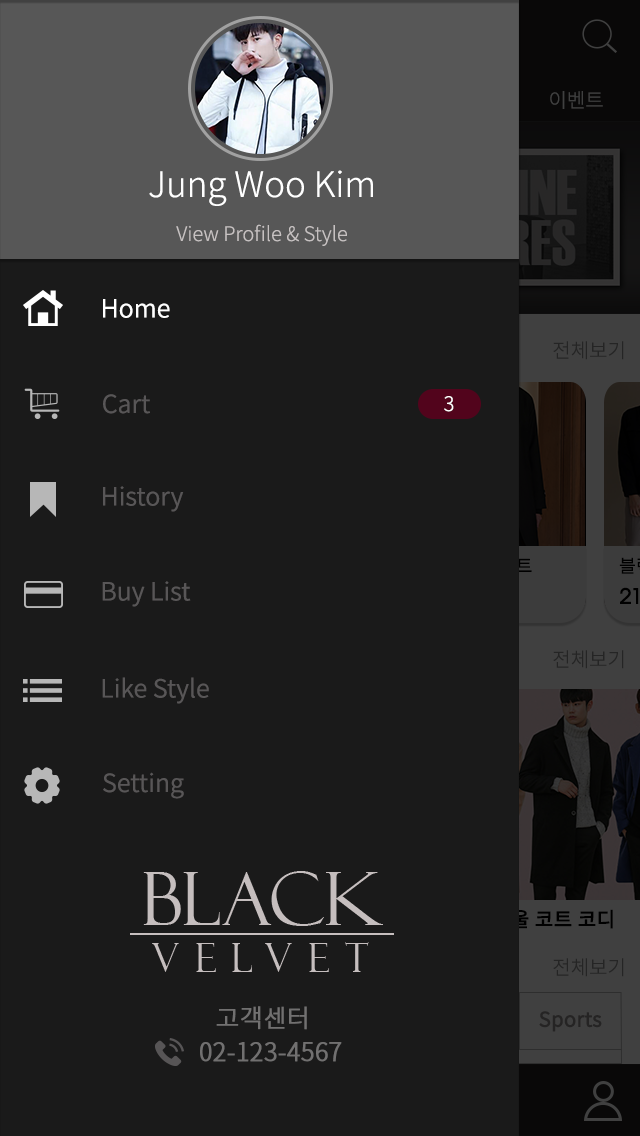
<style>
.page{position:relative;width:640px;height:1136px;background:#1a1a1a}
.page>*{position:absolute;margin:0}
.t1{font:20px "NotoSansCJKkr-Light";color:#404040}
.t2{font:35px "NotoSansCJKkr-Light";color:#ffffff}
.t3{font:20px "NotoSansCJKkr-Light";color:#c5c0c0}
.t4{font:25px "NotoSansCJKkr-DemiLight";color:#ffffff}
.t5{font:20px "NotoSansCJKkr-Light";color:#252525}
.t6{font:25px "NotoSansCJKkr-DemiLight";color:#585657}
.t7{font:20px "NotoSansCJKkr-Light";color:#ffffff}
.t8{font:20px "NotoSansCJKkr-Regular";font-weight:bold}
.t9{font:25px "NotoSansCJKkr-Light";color:#717070;font-weight:bold}
.t10{font:20px "NotoSansCJKkr-DemiLight";color:#252424;font-weight:bold}
</style>
<div class="page">
<p class="t1" style="left:550px;top:91px;width:53px;height:18px">이벤트</p>
<p class="t2" style="left:149px;top:170px;width:224px;height:36px">Jung Woo Kim</p>
<p class="t3" style="left:176px;top:224px;width:171px;height:22px">View Profile &amp; Style</p>
<p class="t4" style="left:103px;top:299px;width:67px;height:19px">Home</p>
<p class="t5" style="left:553px;top:341px;width:71px;height:19px">전체보기</p>
<p class="t6" style="left:103px;top:394px;width:47px;height:20px">Cart</p>
<p class="t7" style="left:444px;top:396px;width:10px;height:16px">3</p>
<p class="t6" style="left:103px;top:486px;width:81px;height:26px">History</p>
<p class="t6" style="left:102px;top:581px;width:89px;height:26px">Buy List</p>
<p class="t5" style="left:553px;top:650px;width:71px;height:19px">전체보기</p>
<p class="t6" style="left:102px;top:677px;width:107px;height:27px">Like Style</p>
<p class="t6" style="left:103px;top:772px;width:81px;height:27px">Setting</p>
<p class="t8" style="left:369px;top:909px;width:244px;height:20px">모델 김정현의 겨울 코트 코디</p>
<p class="t5" style="left:553px;top:958px;width:71px;height:19px">전체보기</p>
<p class="t9" style="left:216px;top:1006px;width:91px;height:24px">고객센터</p>
<p class="t10" style="left:539px;top:1011px;width:63px;height:21px">Sports</p>
<p class="t9" style="left:200px;top:1042px;width:142px;height:20px">02-123-4567</p>
</div>
